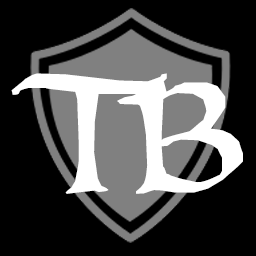
<style>
.page{position:relative;width:256px;height:256px;background:#000000}
.page>*{position:absolute;margin:0}
.t1{font:168px "PR-UncialAltCaps2";letter-spacing:-0.4em;color:#ffffff;font-variant:small-caps;scale:0.83 1}
</style>
<div class="page">
<p class="t1" style="left:11px;top:73px;width:232px;height:121px">TB</p>
</div>
